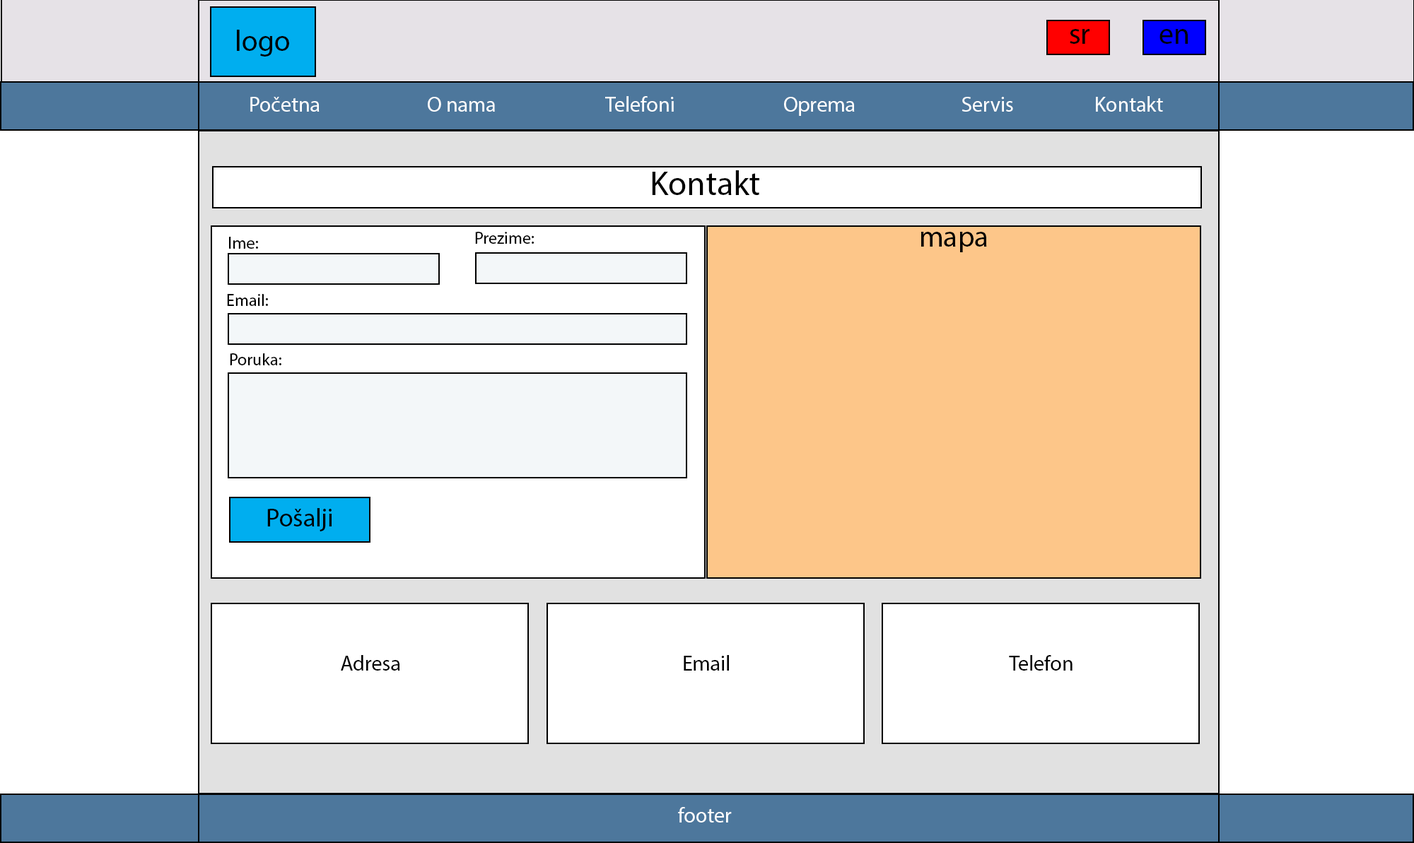
<style>
.page{position:relative;width:1414px;height:843px;background:#ffffff}
.page>*{position:absolute;margin:0}
.t1{font:29.5px "MyriadPro-Regular";color:#000101}
.t2{font:21.2px "MyriadPro-Regular";color:#ffffff}
.t3{font:21.2px "MyriadPro-Regular";color:#000101}
.t4{font:33.9px "MyriadPro-Regular";color:#000000}
.t5{font:17px "MyriadPro-Regular";color:#000000}
.t6{font:29.5px "MyriadPro-Regular";color:#000000}
.t7{font:25.4px "MyriadPro-Regular";color:#000000}
.t8{font:21.2px "MyriadPro-Regular";color:#000000}
</style>
<div class="page">
<p class="t1" style="left:237px;top:30px;width:52px;height:27px">logo</p>
<p class="t1" style="left:1070px;top:29px;width:19px;height:15px">sr</p>
<p class="t1" style="left:1159px;top:29px;width:29px;height:15px">en</p>
<p class="t2" style="left:250px;top:96px;width:913px;height:20px"><span class="t3">  </span>Početna     O nama     Telefoni     Oprema     Servis Kontakt</p>
<p class="t4" style="left:652px;top:170px;width:107px;height:25px">Kontakt</p>
<p class="t5" style="left:475px;top:232px;width:59px;height:12px">Prezime:</p>
<p class="t6" style="left:920px;top:232px;width:67px;height:20px">mapa</p>
<p class="t5" style="left:229px;top:237px;width:29px;height:12px">Ime:</p>
<p class="t5" style="left:227px;top:294px;width:41px;height:12px">Email:</p>
<p class="t5" style="left:230px;top:353px;width:51px;height:12px">Poruka:</p>
<p class="t7" style="left:267px;top:508px;width:65px;height:24px">Pošalji</p>
<p class="t8" style="left:341px;top:655px;width:59px;height:16px">Adresa</p>
<p class="t8" style="left:684px;top:655px;width:45px;height:16px">Email</p>
<p class="t8" style="left:1009px;top:655px;width:63px;height:16px">Telefon</p>
<p class="t2" style="left:678px;top:807px;width:54px;height:16px">footer</p>
</div>
